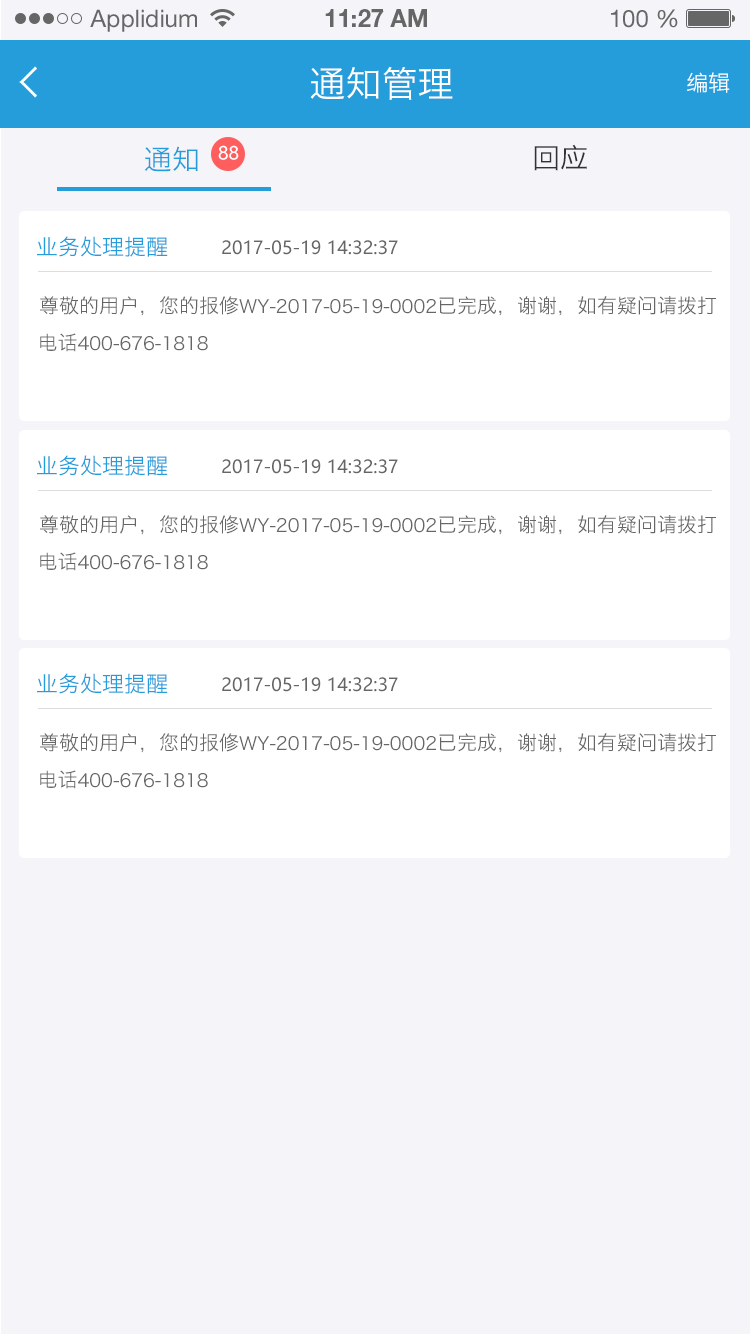
<style>
.page{position:relative;width:750px;height:1334px;background:#f5f4f9}
.page>*{position:absolute;margin:0}
.t1{font:24px "HelveticaNeueLTStd-Roman";color:#666666}
.t2{font:24px "HelveticaNeueLTStd-Bd";color:#666666}
.t3{font:36px "HiraginoSansGB-W3";color:#ffffff;text-transform:uppercase}
.t4{font:22px "HiraginoSansGB-W3";color:#ffffff;text-transform:uppercase}
.t5{font:28px "HiraginoSansGB-W3";color:#259dda;text-transform:uppercase}
.t6{font:18px "MicrosoftYaHei";color:#ffffff;text-transform:uppercase}
.t7{font:28px "HiraginoSansGB-W3";color:#333333;text-transform:uppercase}
.t8{font:22px "HiraginoSansGB-W3";color:#259dda;text-transform:uppercase}
.t9{font:18px "MicrosoftYaHei";color:#666666;text-transform:uppercase}
.t10{font:18px "HiraginoSansGB-W3";color:#666666;text-transform:uppercase}
.t11{font:20px "HiraginoSansGB-W3";color:#666666;text-transform:uppercase}
</style>
<div class="page">
<p class="t1" style="left:90px;top:9px;width:107px;height:23px">Applidium</p>
<p class="t2" style="left:325px;top:9px;width:102px;height:18px">11:27 AM</p>
<p class="t1" style="left:611px;top:9px;width:67px;height:19px">100 %</p>
<p class="t3" style="left:310px;top:66px;width:143px;height:34px">通知管理</p>
<p class="t4" style="left:687px;top:72px;width:43px;height:21px">编辑</p>
<p class="t5" style="left:144px;top:146px;width:54px;height:26px">通知</p>
<p class="t6" style="left:218px;top:145px;width:21px;height:15px">88</p>
<p class="t7" style="left:534px;top:144px;width:53px;height:27px">回应</p>
<p class="t8" style="left:37px;top:236px;width:131px;height:21px">业务处理提醒</p>
<p class="t9" style="left:222px;top:240px;width:176px;height:15px">2017-05-19 14:32:37</p>
<p class="t10" style="left:40px;top:296px;width:676px;height:20px"><span class="t11">尊敬的用户，您的报修</span>WY-2017-05-19-0002<span class="t11">已完成，谢谢，如有疑问请拨打</span></p>
<p class="t10" style="left:40px;top:333px;width:168px;height:19px"><span class="t11">电话</span>400-676-1818</p>
<p class="t8" style="left:37px;top:455px;width:131px;height:21px">业务处理提醒</p>
<p class="t9" style="left:222px;top:459px;width:176px;height:15px">2017-05-19 14:32:37</p>
<p class="t10" style="left:40px;top:515px;width:676px;height:20px"><span class="t11">尊敬的用户，您的报修</span>WY-2017-05-19-0002<span class="t11">已完成，谢谢，如有疑问请拨打</span></p>
<p class="t10" style="left:40px;top:552px;width:168px;height:19px"><span class="t11">电话</span>400-676-1818</p>
<p class="t8" style="left:37px;top:673px;width:131px;height:21px">业务处理提醒</p>
<p class="t9" style="left:222px;top:677px;width:176px;height:15px">2017-05-19 14:32:37</p>
<p class="t10" style="left:40px;top:733px;width:676px;height:20px"><span class="t11">尊敬的用户，您的报修</span>WY-2017-05-19-0002<span class="t11">已完成，谢谢，如有疑问请拨打</span></p>
<p class="t10" style="left:40px;top:770px;width:168px;height:19px"><span class="t11">电话</span>400-676-1818</p>
</div>
